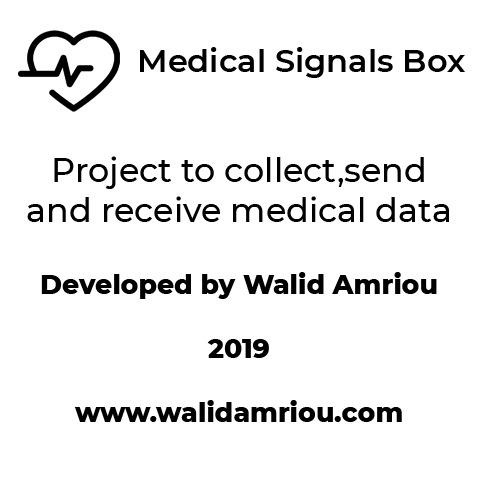
<style>
.page{position:relative;width:500px;height:500px;background:#ffffff}
.page>*{position:absolute;margin:0}
.t1{font:32px "Montserrat-SemiBold";color:#000000}
.t2{font:26.7px "Montserrat-ExtraBold";color:#000000}
.t3{font:33.3px "Montserrat-Medium";color:#000000}
</style>
<div class="page">
<p class="t1" style="left:140px;top:47px;width:325px;height:31px">Medical Signals Box</p>
<p class="t2" style="left:27px;top:156px;width:422px;height:266px;text-align:center"><span class="t3">Project to collect,send<br>and receive medical data<br><br></span>Developed by Walid Amriou<br><br>2019<br><br>www.walidamriou.com</p>
</div>
